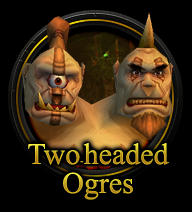
<style>
.page{position:relative;width:192px;height:212px;background:#000000}
.page>*{position:absolute;margin:0}
.t1{font:30px "TimesNewRomanPSMT"}
.t2{font:10px "TimesNewRomanPSMT"}
</style>
<div class="page">
<p class="t1" style="left:28px;top:143px;width:141px;height:22px">Two<span class="t2">-</span>headed</p>
<p class="t1" style="left:63px;top:172px;width:70px;height:28px">Ogres</p>
</div>
